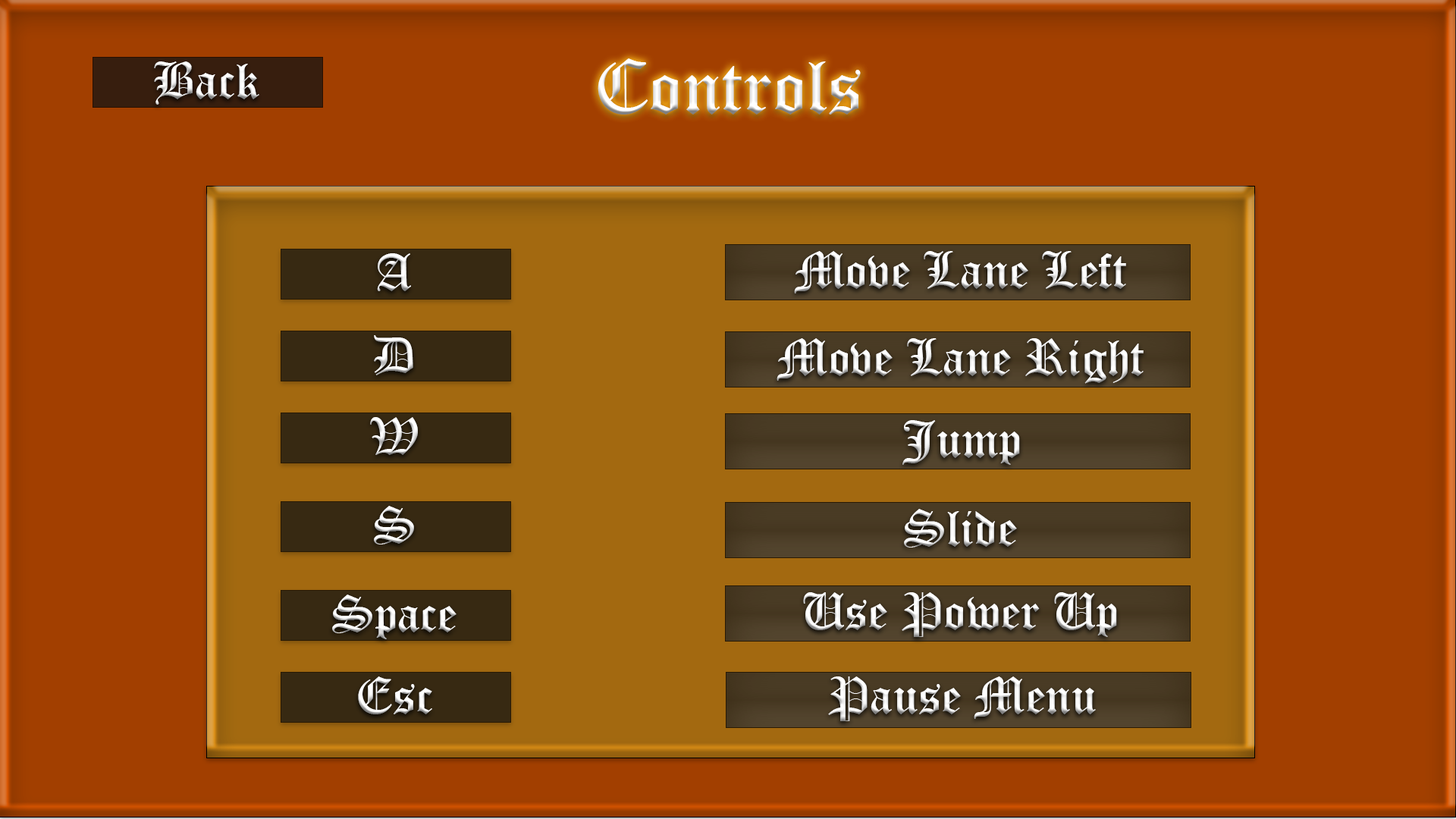
<style>
.page{position:relative;width:1456px;height:819px;background:#a23f00}
.page>*{position:absolute;margin:0}
.t1{font:50.6px "OldEnglishTextMT";color:#ffffff}
.t2{font:75.8px "OldEnglishTextMT";color:#ffffff}
.t3{font:50.6px "OldEnglishTextMT"}
</style>
<div class="page">
<p class="t1" style="left:154px;top:61px;width:105px;height:44px">Back</p>
<p class="t2" style="left:598px;top:58px;width:263px;height:57px">Controls</p>
<p class="t1" style="left:377px;top:253px;width:34px;height:38px">A</p>
<p class="t1" style="left:794px;top:251px;width:332px;height:42px">Move Lane Left</p>
<p class="t1" style="left:374px;top:335px;width:39px;height:40px">D</p>
<p class="t1" style="left:777px;top:338px;width:367px;height:46px">Move Lane Right</p>
<p class="t1" style="left:370px;top:417px;width:48px;height:38px">W</p>
<p class="t1" style="left:902px;top:420px;width:118px;height:45px">Jump</p>
<p class="t3" style="left:374px;top:506px;width:40px;height:38px">S</p>
<p class="t1" style="left:904px;top:509px;width:113px;height:39px">Slide</p>
<p class="t1" style="left:803px;top:592px;width:314px;height:45px">Use Power Up</p>
<p class="t1" style="left:332px;top:595px;width:125px;height:44px">Space</p>
<p class="t1" style="left:358px;top:676px;width:74px;height:38px">Esc</p>
<p class="t1" style="left:828px;top:676px;width:268px;height:45px">Pause Menu</p>
</div>
